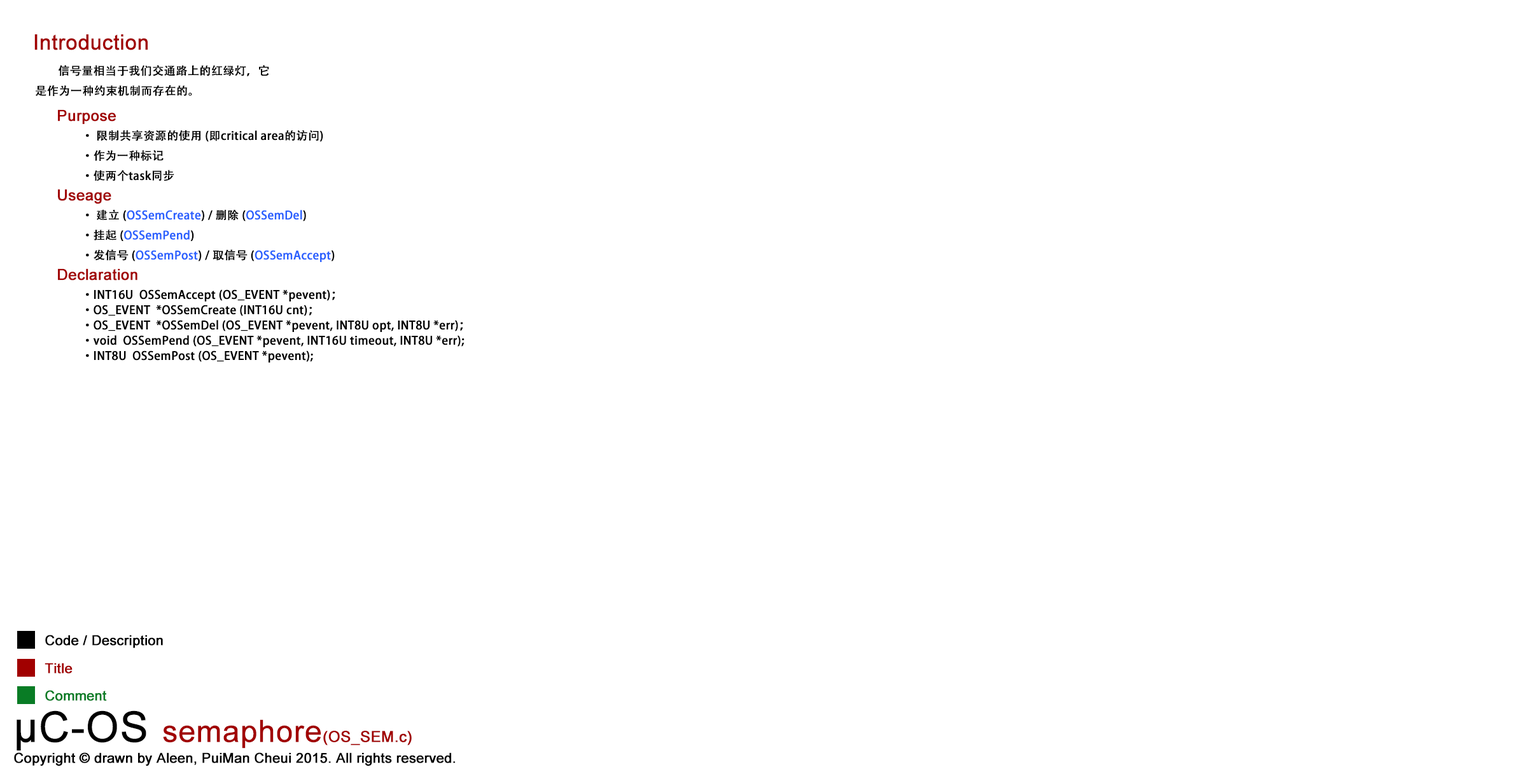
<style>
.page{position:relative;width:1526px;height:781px;background:#ffffff}
.page>*{position:absolute;margin:0}
.t1{font:21px "ArialMT";color:#a10000;font-weight:bold}
.t2{font:11.5px "AdobeHeitiStd-Regular";color:#000000;font-weight:bold}
.t3{font:15.3px "ArialMT";color:#a10000;font-weight:bold}
.t4{font:11.5px "AdobeHeitiStd-Regular";color:#2b61fe;font-weight:bold}
.t5{font:11.5px/15.3px "AdobeHeitiStd-Regular";color:#000000;font-weight:bold}
.t6{font:13.6px "ArialMT";color:#000000;font-weight:bold}
.t7{font:13.6px "ArialMT";color:#a10000;font-weight:bold}
.t8{font:13.6px "ArialMT";color:#097c25;font-weight:bold}
.t9{font:42.3px "ArialMT";color:#000000;font-weight:bold}
.t10{font:30.5px "ArialMT";color:#a10000;font-weight:bold}
</style>
<div class="page">
<p class="t1" style="left:34px;top:34px;width:114px;height:16px">Introduction</p>
<p class="t2" style="left:36px;top:65px;width:233px;height:31px">信号量相当于我们交通路上的红绿灯，它是作为一种约束机制而存在的。</p>
<p class="t3" style="left:58px;top:109px;width:58px;height:15px">Purpose</p>
<p class="t2" style="left:86px;top:130px;width:237px;height:51px">· 限制共享资源的使用 (即critical area的访问)<br> ·作为一种标记<br> ·使两个task同步</p>
<p class="t3" style="left:58px;top:189px;width:53px;height:15px">Useage</p>
<p class="t4" style="left:86px;top:209px;width:249px;height:53px"><span class="t2">  · 建立 (</span>OSSemCreate<span class="t2">) / 删除 (</span>OSSemDel<span class="t2">)<br> ·挂起 (</span>OSSemPend<span class="t2">)<br> ·发信号 (</span>OSSemPost<span class="t2">) / 取信号 (</span>OSSemAccept<span class="t2">)</span></p>
<p class="t3" style="left:58px;top:269px;width:79px;height:12px">Declaration</p>
<p class="t5" style="left:86px;top:290px;width:379px;height:73px">·INT16U  OSSemAccept (OS_EVENT *pevent)；<br> ·OS_EVENT  *OSSemCreate (INT16U cnt)；<br> ·OS_EVENT  *OSSemDel (OS_EVENT *pevent, INT8U opt, INT8U *err)；<br> ·void  OSSemPend (OS_EVENT *pevent, INT16U timeout, INT8U *err);<br> ·INT8U  OSSemPost (OS_EVENT *pevent);</p>
<p class="t6" style="left:45px;top:635px;width:118px;height:13px">Code / Description</p>
<p class="t7" style="left:45px;top:663px;width:28px;height:11px">Title</p>
<p class="t8" style="left:45px;top:690px;width:62px;height:11px">Comment</p>
<p class="t3" style="left:17px;top:711px;width:395px;height:40px"><span class="t9">μC-OS </span><span class="t10">semaphore</span>(OS_SEM.c)</p>
<p class="t6" style="left:14px;top:753px;width:441px;height:13px">Copyright © drawn by Aleen, PuiMan Cheui 2015. All rights reserved.</p>
</div>
